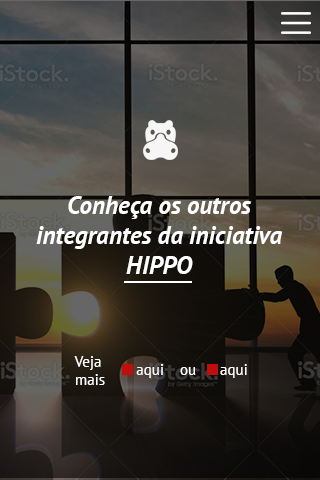
<style>
.page{position:relative;width:320px;height:480px}
.page>*{position:absolute;margin:0}
.t1{font:25px "PTSans-BoldItalic";color:#ffffff}
.t2{font:15px "PTSans-Regular";color:#ffffff}
</style>
<div class="page">
<p class="t1" style="left:36px;top:196px;width:247px;height:78px;text-align:center">Conheça os outros<br>integrantes da iniciativa<br>HIPPO</p>
<p class="t2" style="left:74px;top:356px;width:31px;height:29px;text-align:center">Veja <br>mais</p>
<p class="t2" style="left:136px;top:364px;width:111px;height:14px">aqui    ou      aqui</p>
</div>
